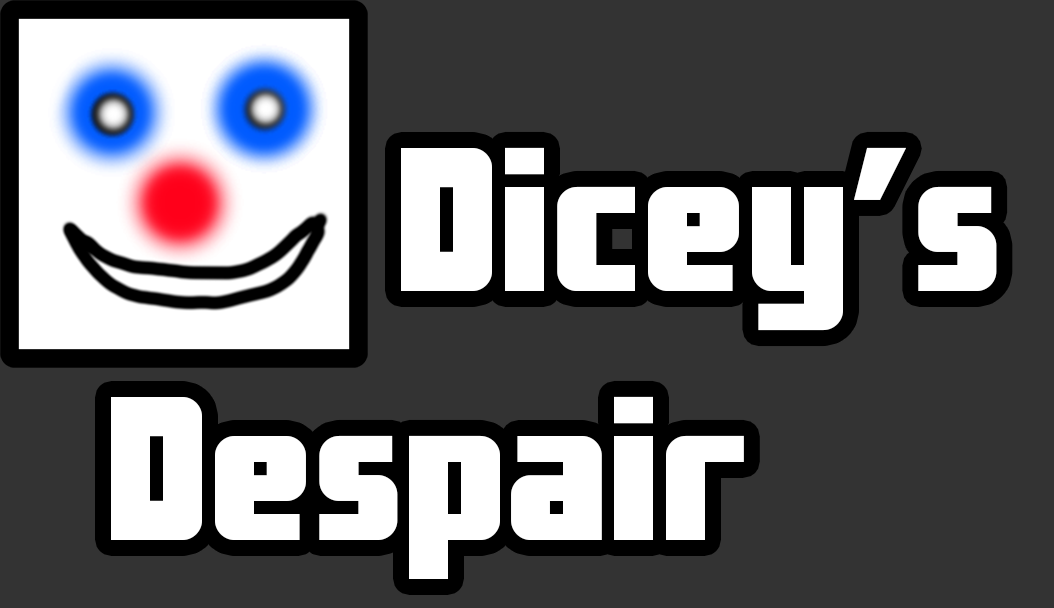
<style>
.page{position:relative;width:1054px;height:608px;background:#333333}
.page>*{position:absolute;margin:0}
.t1{font:207.6px "CostaRica";color:#ffffff}
</style>
<div class="page">
<p class="t1" style="left:111px;top:147px;width:886px;height:432px">Dicey’s <br> Despair</p>
</div>
